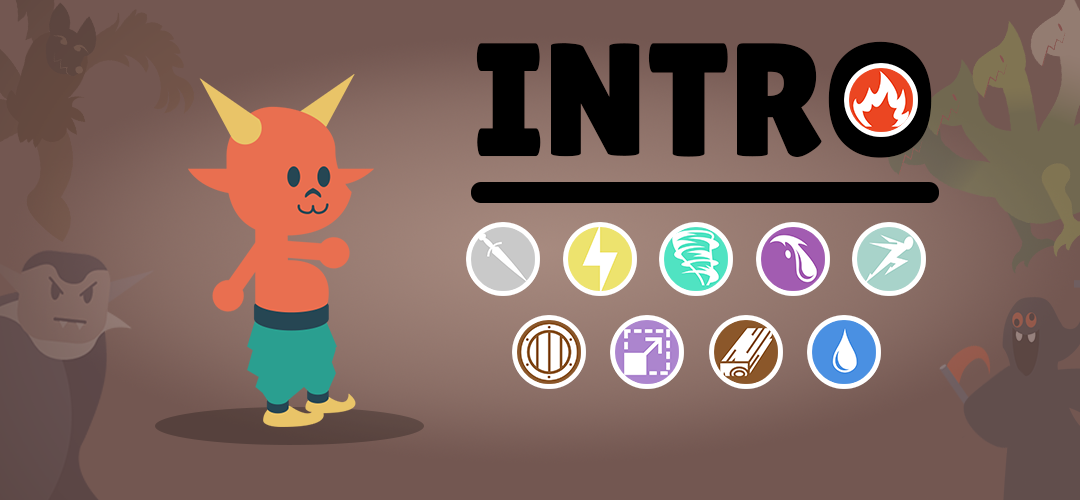
<style>
.page{position:relative;width:1080px;height:500px;background:#735751}
.page>*{position:absolute;margin:0}
.t1{font:161.2px "LilitaOne";color:#000000}
</style>
<div class="page">
<p class="t1" style="left:476px;top:41px;width:456px;height:117px">INTRO</p>
</div>
